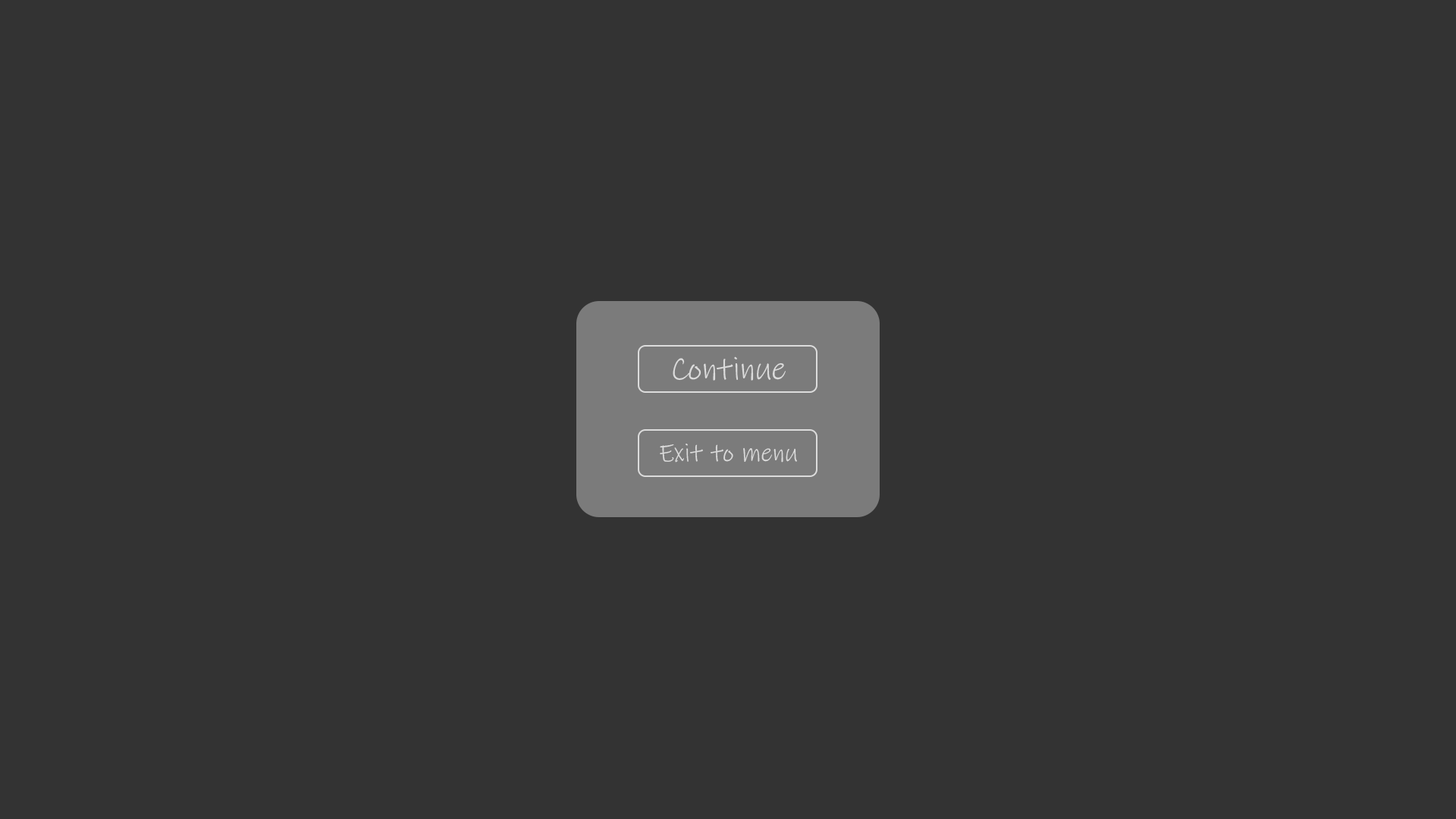
<style>
.page{position:relative;width:1456px;height:819px;background:#333333}
.page>*{position:absolute;margin:0}
.t1{font:32.6px "InkFree";color:#dcdcdc}
.t2{font:25.8px "InkFree";color:#dcdcdc}
</style>
<div class="page">
<p class="t1" style="left:673px;top:356px;width:113px;height:25px">Continue</p>
<p class="t2" style="left:660px;top:444px;width:137px;height:19px">Exit to menu</p>
</div>
